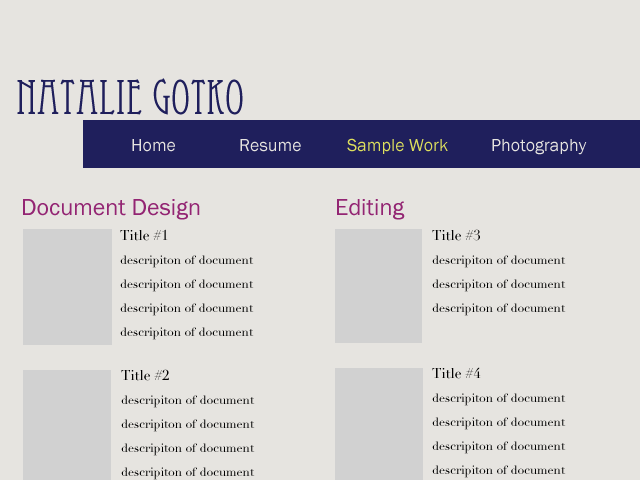
<style>
.page{position:relative;width:640px;height:480px;background:#e6e4e0}
.page>*{position:absolute;margin:0}
.t1{font:48px "EccentricStd";color:#1f1f5c}
.t2{font:18px "FranklinGothic-Book";color:#e6e4e0}
.t3{font:18px "FranklinGothic-Book";color:#dddf5d}
.t4{font:24px "FranklinGothic-Book";color:#932573}
.t5{font:12px/24px "Didot";color:#010101}
.t6{font:14px/24px "Didot";color:#010101}
</style>
<div class="page">
<p class="t1" style="left:17px;top:78px;width:226px;height:37px">Natalie Gotko</p>
<p class="t2" style="left:132px;top:138px;width:455px;height:17px">Home  Resume  <span class="t3">Sample Work </span> Photography</p>
<p class="t4" style="left:23px;top:199px;width:177px;height:21px">Document Design</p>
<p class="t4" style="left:337px;top:199px;width:68px;height:21px">Editing</p>
<p class="t5" style="left:120px;top:229px;width:134px;height:111px"><span class="t6">Title #1<br></span>descripiton of document descripiton of document descripiton of document descripiton of document descripiton of document</p>
<p class="t5" style="left:432px;top:229px;width:134px;height:87px"><span class="t6">Title #3<br></span>descripiton of document descripiton of document descripiton of document descripiton of document descripiton of document</p>
<p class="t5" style="left:121px;top:369px;width:134px;height:111px"><span class="t6">Title #2<br></span>descripiton of document descripiton of document descripiton of document descripiton of document descripiton of document</p>
<p class="t5" style="left:432px;top:367px;width:134px;height:111px"><span class="t6">Title #4<br></span>descripiton of document descripiton of document descripiton of document descripiton of document descripiton of document</p>
</div>
